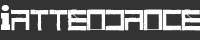
<style>
.page{position:relative;width:200px;height:40px;background:#333333}
.page>*{position:absolute;margin:0}
.t1{font:36.1px "CodePredators-Regular";color:#fbfdfa;scale:0.75 1}
.t2{font:36.1px "Rockwell-ExtraBold";color:#fbfdfa;scale:0.75 1}
</style>
<div class="page">
<p class="t1" style="left:1px;top:5px;width:200px;height:26px"><span class="t2">i</span>Attendance</p>
</div>
